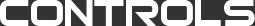
<style>
.page{position:relative;width:255px;height:26px;background:#ffffff}
.page>*{position:absolute;margin:0}
.t1{font:50px "Bitsumishi";color:#ffffff}
</style>
<div class="page">
<p class="t1" style="left:0px;top:0px;width:255px;height:26px">Controls</p>
</div>
